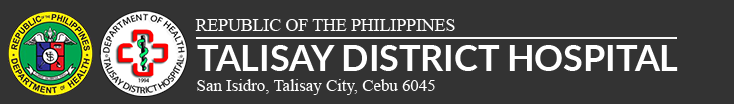
<style>
.page{position:relative;width:734px;height:104px;background:#333333}
.page>*{position:absolute;margin:0}
.t1{font:18px "TimesNewRomanPSMT";color:#ffffff}
.t2{font:36.4px "Lato-Bold";color:#ffffff}
.t3{font:17.1px "TimesNewRomanPSMT";color:#ffffff}
</style>
<div class="page">
<p class="t1" style="left:195px;top:19px;width:260px;height:12px">REPUBLIC OF THE PHILIPPINES</p>
<p class="t2" style="left:197px;top:45px;width:481px;height:26px">TALISAY DISTRICT HOSPITAL</p>
<p class="t3" style="left:197px;top:79px;width:238px;height:16px">San Isidro, Talisay City, Cebu 6045</p>
</div>
